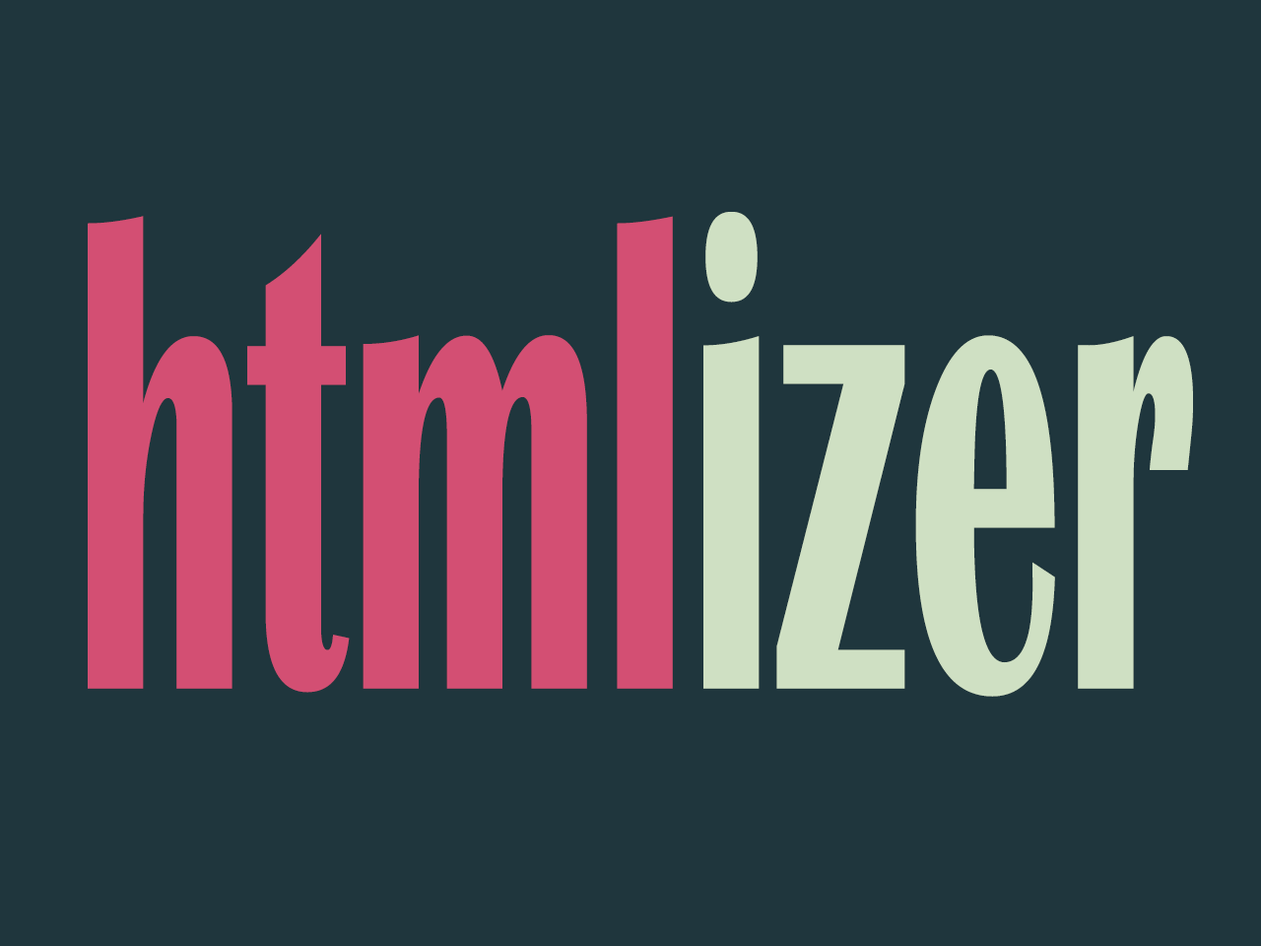
<style>
.page{position:relative;width:1261px;height:946px;background:#1f363d}
.page>*{position:absolute;margin:0}
.t1{font:697.2px "BritannicBold";color:#d34f73;scale:0.44 1}
.t2{font:697.2px "BritannicBold";color:#cfe0c3;scale:0.44 1}
</style>
<div class="page">
<p class="t1" style="left:88px;top:212px;width:1105px;height:484px">html<span class="t2">izer</span></p>
</div>
